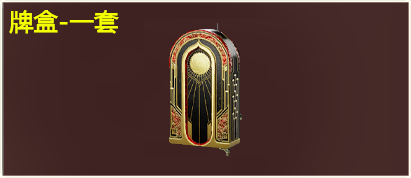
<style>
.page{position:relative;width:411px;height:178px}
.page>*{position:absolute;margin:0}
.t1{font:24px "MicrosoftYaHei";color:#f4ff00;font-weight:bold}
</style>
<div class="page">
<p class="t1" style="left:9px;top:10px;width:110px;height:24px">牌盒-一套</p>
</div>
